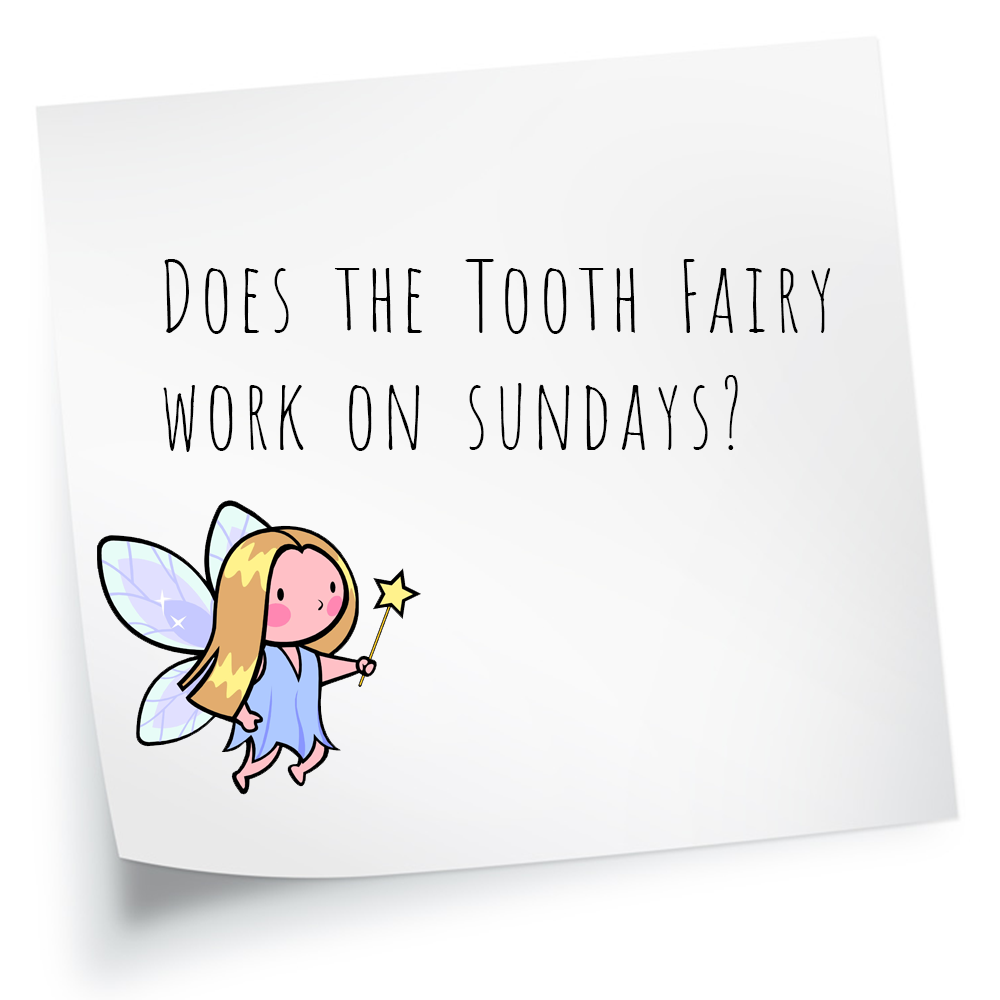
<style>
.page{position:relative;width:1000px;height:1000px;background:#ffffff}
.page>*{position:absolute;margin:0}
.t1{font:97.2px "Amatic";color:#000000}
</style>
<div class="page">
<p class="t1" style="left:163px;top:259px;width:668px;height:193px">Does the Tooth Fairy<br>work on sundays?</p>
</div>
